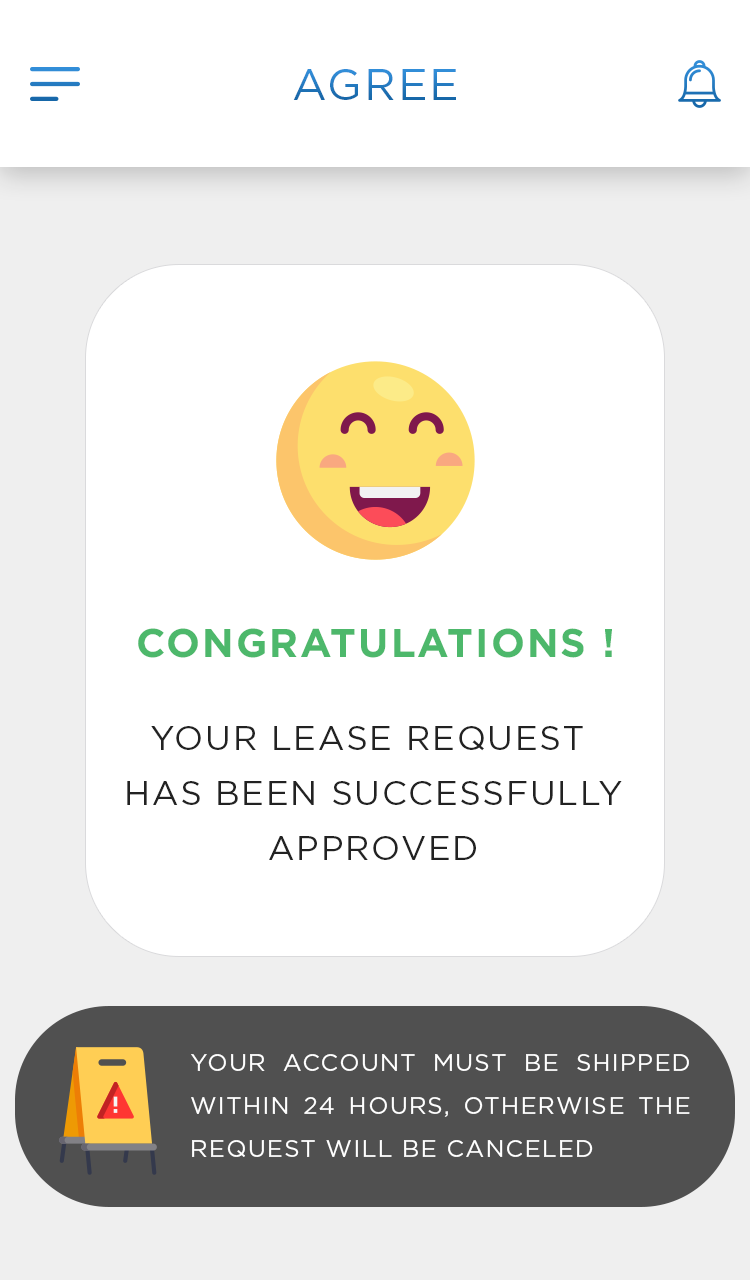
<style>
.page{position:relative;width:750px;height:1280px;background:#ffffff}
.page>*{position:absolute;margin:0}
.t1{font:44px "Gotham-Book";letter-spacing:0.05em;text-transform:uppercase}
.t2{font:40px "Gotham-Bold";letter-spacing:0.05em;color:#4db86b;text-transform:uppercase}
.t3{font:34px/55px "Gotham-Book";letter-spacing:0.05em;color:#222222;text-transform:uppercase}
.t4{font:24px/43px "Gotham-Book";letter-spacing:0.05em;color:#ffffff;text-transform:uppercase}
</style>
<div class="page">
<p class="t1" style="left:293px;top:69px;width:163px;height:31px">AGREE</p>
<p class="t2" style="left:138px;top:628px;width:474px;height:30px">Congratulations !</p>
<p class="t3" style="left:127px;top:726px;width:495px;height:134px;text-align:center">Your lease request<br> has been successfully<br> approved</p>
<p class="t4" style="left:191px;top:1054px;width:499px;height:103px;text-align:justify">Your account must be shipped within 24 hours, otherwise the request will be canceled</p>
</div>
